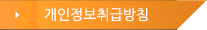
<style>
.page{position:relative;width:207px;height:30px}
.page>*{position:absolute;margin:0}
.t1{font:14px "NanumGothic";color:#ffffff}
</style>
<div class="page">
<p class="t1" style="left:44px;top:8px;width:104px;height:14px">개인정보취급방침</p>
</div>
